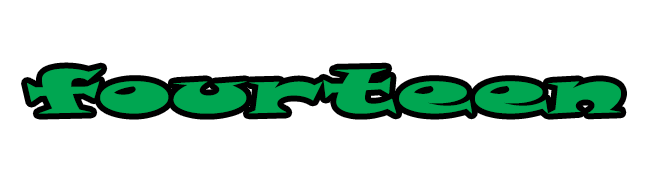
<style>
.page{position:relative;width:650px;height:191px;background:#ffffff}
.page>*{position:absolute;margin:0}
.t1{font:60px "SnapITC-Regular";color:#00a651;scale:2 1}
</style>
<div class="page">
<p class="t1" style="left:27px;top:68px;width:594px;height:46px">fourteen</p>
</div>
